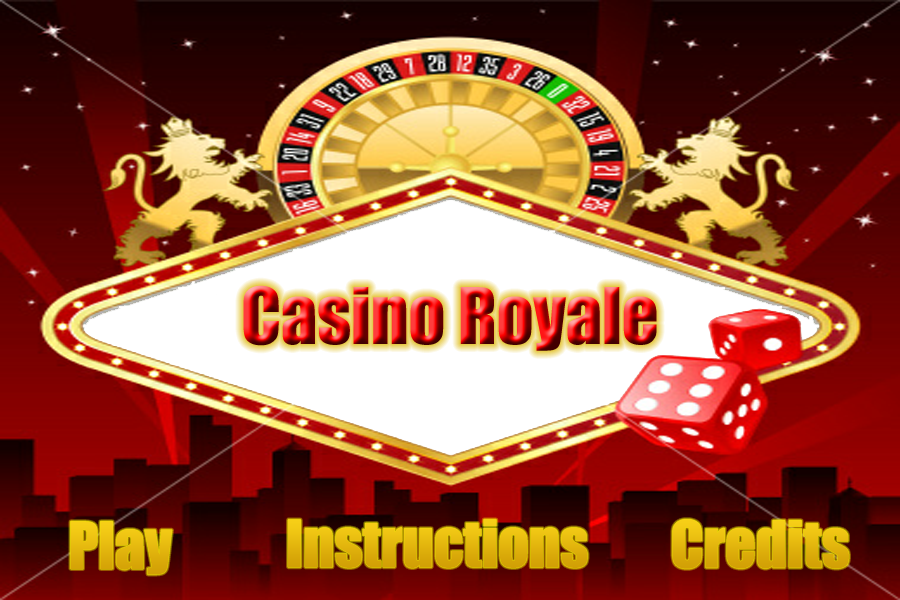
<style>
.page{position:relative;width:900px;height:600px}
.page>*{position:absolute;margin:0}
.t1{font:72px "Impact"}
.t2{font:60px "Impact";color:#e6b90f}
.t3{font:60px "Impact";color:#e2b40d}
.t4{font:60px "Impact";color:#e3b60e}
</style>
<div class="page">
<p class="t1" style="left:243px;top:285px;width:414px;height:66px">Casino Royale</p>
<p class="t2" style="left:70px;top:521px;width:102px;height:54px">Play</p>
<p class="t3" style="left:288px;top:519px;width:300px;height:49px">Instructions</p>
<p class="t4" style="left:672px;top:519px;width:177px;height:50px">Credits</p>
</div>
